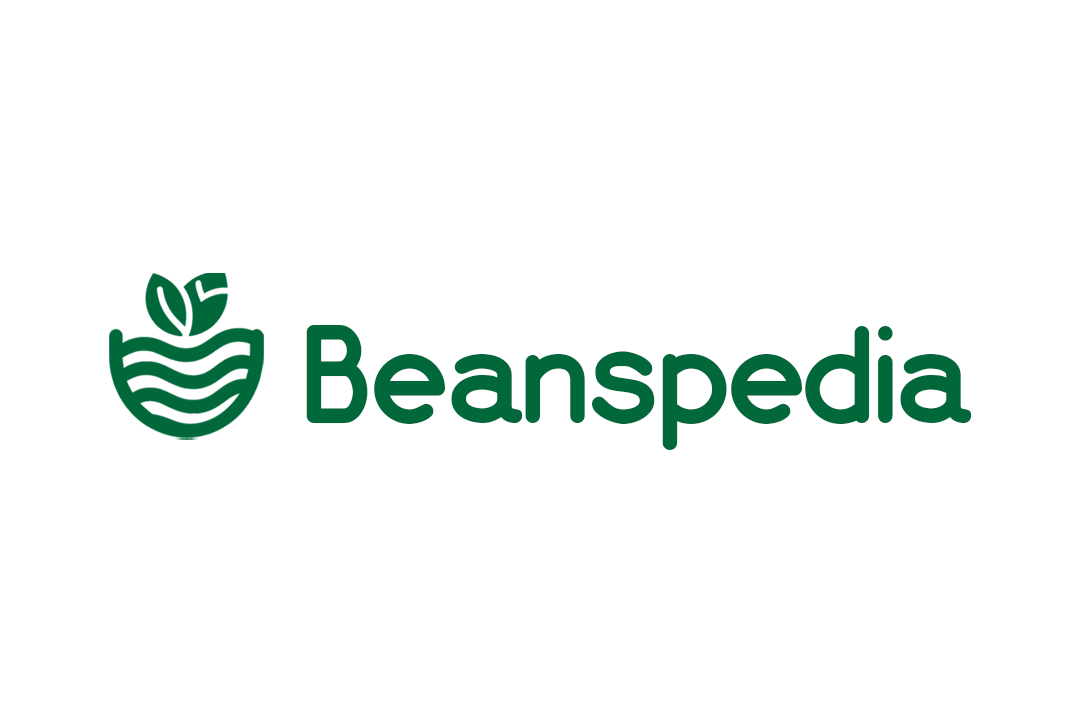
<style>
.page{position:relative;width:1080px;height:720px;background:#ffffff}
.page>*{position:absolute;margin:0}
.t1{font:151.3px "EspressoDolce";color:#01683c}
</style>
<div class="page">
<p class="t1" style="left:306px;top:325px;width:666px;height:125px">Beanspedia</p>
</div>
